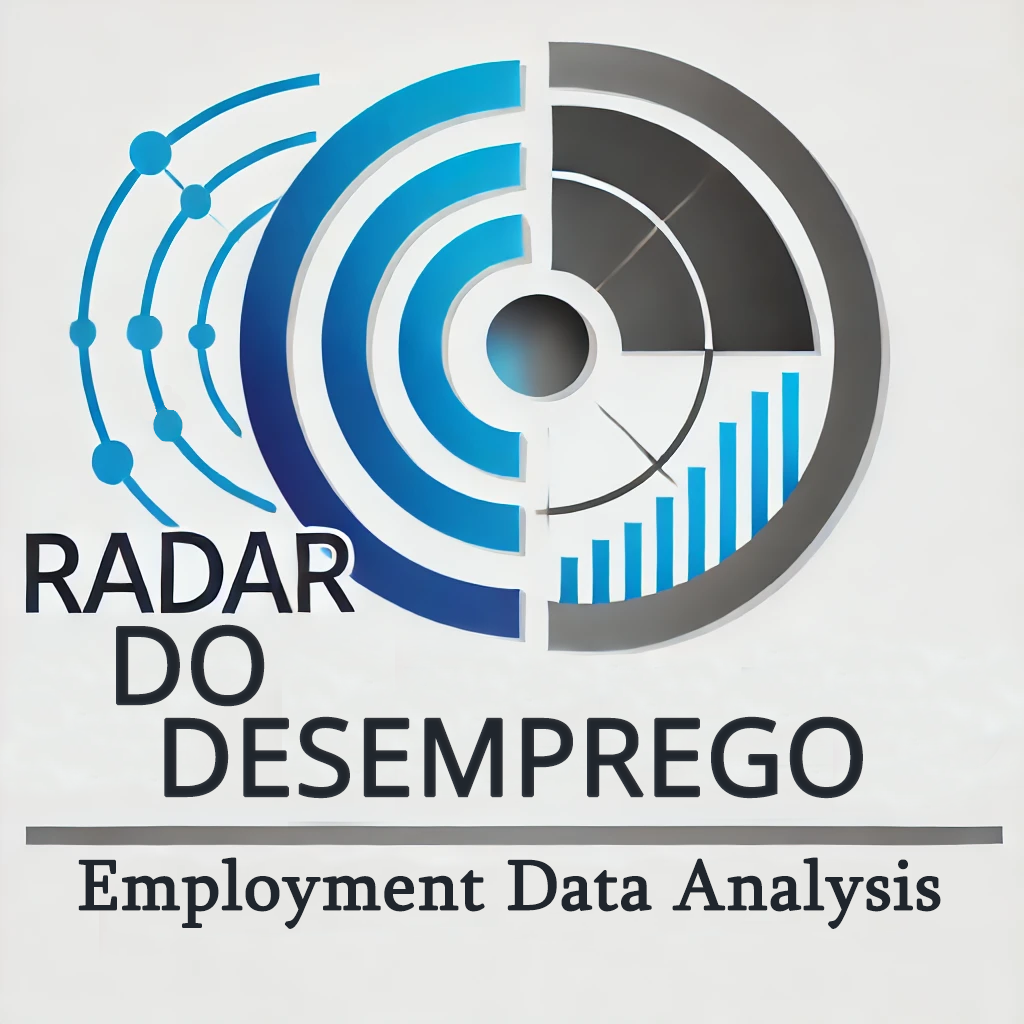
<style>
.page{position:relative;width:1024px;height:1024px}
.page>*{position:absolute;margin:0}
.t1{font:118px "Khula-Regular";color:#20262d;font-weight:bold}
.t2{font:72px "Sylfaen";color:#20262d;font-weight:bold}
</style>
<div class="page">
<p class="t1" style="left:116px;top:624px;width:149px;height:83px">DO</p>
<p class="t1" style="left:164px;top:716px;width:699px;height:83px">DESEMPREGO</p>
<p class="t2" style="left:78px;top:857px;width:863px;height:72px">Employment Data Analysis</p>
</div>
